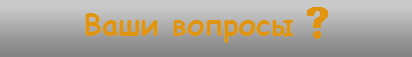
<style>
.page{position:relative;width:412px;height:57px}
.page>*{position:absolute;margin:0}
.t1{font:29.3px "ComicSansMS-Bold";color:#e09510}
</style>
<div class="page">
<p class="t1" style="left:85px;top:13px;width:209px;height:30px">Ваши вопросы</p>
</div>
